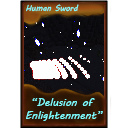
<style>
.page{position:relative;width:128px;height:128px;background:#ffffff}
.page>*{position:absolute;margin:0}
.t1{font:8px "MVBoli";color:#7fffff}
.t2{font:10.7px "MVBoli";color:#7fffff}
</style>
<div class="page">
<p class="t1" style="left:26px;top:4px;width:53px;height:8px">Human Sword</p>
<p class="t2" style="left:26px;top:98px;width:77px;height:23px;text-align:center">“Delusion of <br>Enlightenment”</p>
</div>
